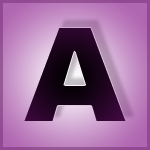
<style>
.page{position:relative;width:150px;height:150px}
.page>*{position:absolute;margin:0}
.t1{font:133.3px "Arial-Black";color:#1c041c}
</style>
<div class="page">
<p class="t1" style="left:23px;top:27px;width:104px;height:95px">A</p>
</div>
